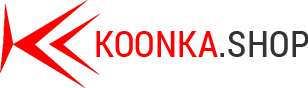
<style>
.page{position:relative;width:308px;height:88px;background:#ffffff}
.page>*{position:absolute;margin:0}
.t1{font:36px "RobotoCondensed-Regular";letter-spacing:0.01em;color:#fe0000}
.t2{font:36px "RobotoCondensed-Regular";letter-spacing:0.01em;color:#333333}
</style>
<div class="page">
<p class="t1" style="left:96px;top:31px;width:213px;height:26px">KOONKA<span class="t2">.SHOP</span></p>
</div>
